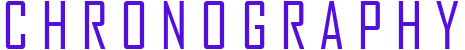
<style>
.page{position:relative;width:465px;height:50px;background:#ffffff}
.page>*{position:absolute;margin:0}
.t1{font:63px "AgencyFB-Reg";color:#5310db}
</style>
<div class="page">
<p class="t1" style="left:5px;top:1px;width:454px;height:48px">C H R O N O G R A P H Y</p>
</div>
